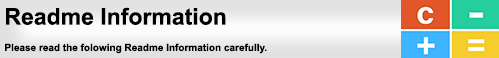
<style>
.page{position:relative;width:499px;height:58px}
.page>*{position:absolute;margin:0}
.t1{font:10px "Arial-BoldMT";color:#000000}
.t2{font:23px "Arial-BoldMT";color:#000000}
.t3{font:12px "ArialMT";color:#000000}
</style>
<div class="page">
<p class="t1" style="left:5px;top:7px;width:262px;height:47px"><span class="t2">Readme Information <br></span><span class="t3"><br></span> Please read the folowing Readme Information carefully.</p>
</div>
